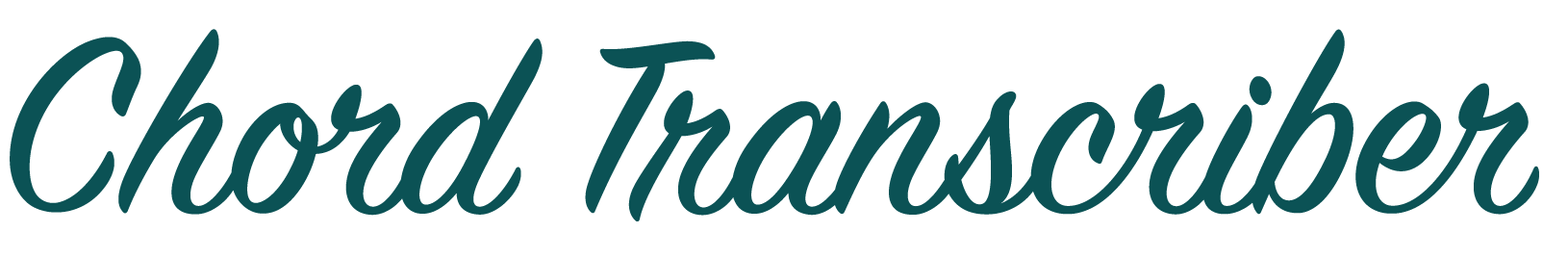
<style>
.page{position:relative;width:1568px;height:258px;background:#ffffff}
.page>*{position:absolute;margin:0}
.t1{font:273.2px "SignPainter-HouseScript";color:#0b5255}
</style>
<div class="page">
<p class="t1" style="left:10px;top:29px;width:1529px;height:192px">Chord Transcriber</p>
</div>
